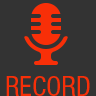
<style>
.page{position:relative;width:96px;height:96px;background:#333333}
.page>*{position:absolute;margin:0}
.t1{font:28px "HelveticaNeueLTStd-Cn";color:#f82f08;text-transform:uppercase}
</style>
<div class="page">
<p class="t1" style="left:6px;top:76px;width:84px;height:20px">RECORD</p>
</div>
